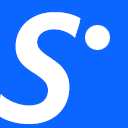
<style>
.page{position:relative;width:128px;height:128px;background:#0a66ff}
.page>*{position:absolute;margin:0}
.t1{font:157px "Macho-SemiBoldItalic";color:#ffffff}
</style>
<div class="page">
<p class="t1" style="left:0px;top:12px;width:81px;height:112px;rotate:5deg">S</p>
</div>
